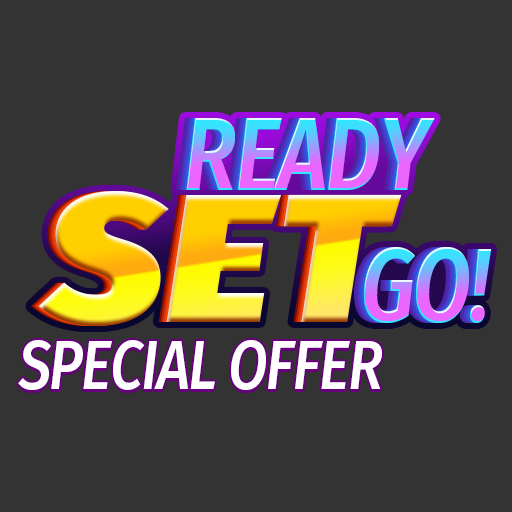
<style>
.page{position:relative;width:512px;height:512px;background:#333333}
.page>*{position:absolute;margin:0}
.t1{font:104.1px "FiraSans-SemiBoldItalic";letter-spacing:-0.025em;scale:0.83 1}
.t2{font:182.2px "FiraSans-UltraItalic";letter-spacing:0.025em;scale:1.11 1}
.t3{font:69.4px "FiraSans-MediumItalic";letter-spacing:-0.025em;color:#ffffff;scale:0.83 1}
</style>
<div class="page">
<p class="t1" style="left:186px;top:118px;width:249px;height:72px">READY</p>
<p class="t2" style="left:39px;top:191px;width:363px;height:135px">SET</p>
<p class="t1" style="left:364px;top:246px;width:128px;height:77px">GO!</p>
<p class="t3" style="left:18px;top:340px;width:364px;height:50px">SPECIAL OFFER</p>
</div>
